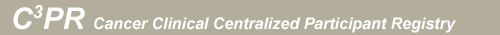
<style>
.page{position:relative;width:500px;height:35px;background:#b3ae9c}
.page>*{position:absolute;margin:0}
.t1{font:16px "Arial-BoldItalicMT";color:#ffffff}
.t2{font:30px "Arial-BoldItalicMT";color:#ffffff}
.t3{font:18px "Arial-BoldItalicMT";color:#ffffff}
</style>
<div class="page">
<p class="t1" style="left:13px;top:5px;width:443px;height:28px"><span class="t2">C</span><span class="t3">3</span><span class="t2">PR </span>Cancer Clinical Centralized Participant Registry</p>
</div>
